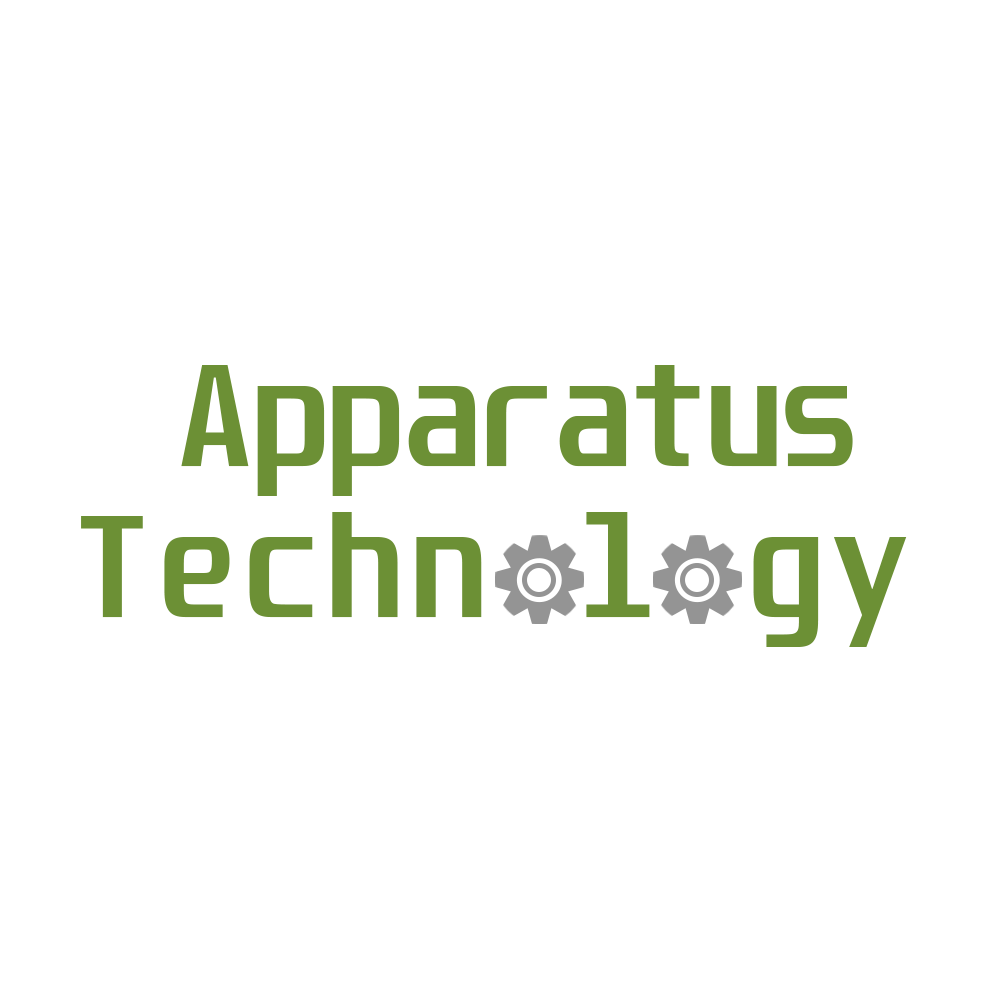
<style>
.page{position:relative;width:1000px;height:1000px;background:#ffffff}
.page>*{position:absolute;margin:0}
.t1{font:123.5px "Unispace-Bold";color:#6c9035}
.t2{font:123.5px "Unispace-Bold";letter-spacing:0.07em;color:#6c9035}
</style>
<div class="page">
<p class="t1" style="left:181px;top:365px;width:672px;height:131px">Apparatus</p>
<p class="t2" style="left:81px;top:512px;width:826px;height:135px">Techn l gy</p>
</div>
